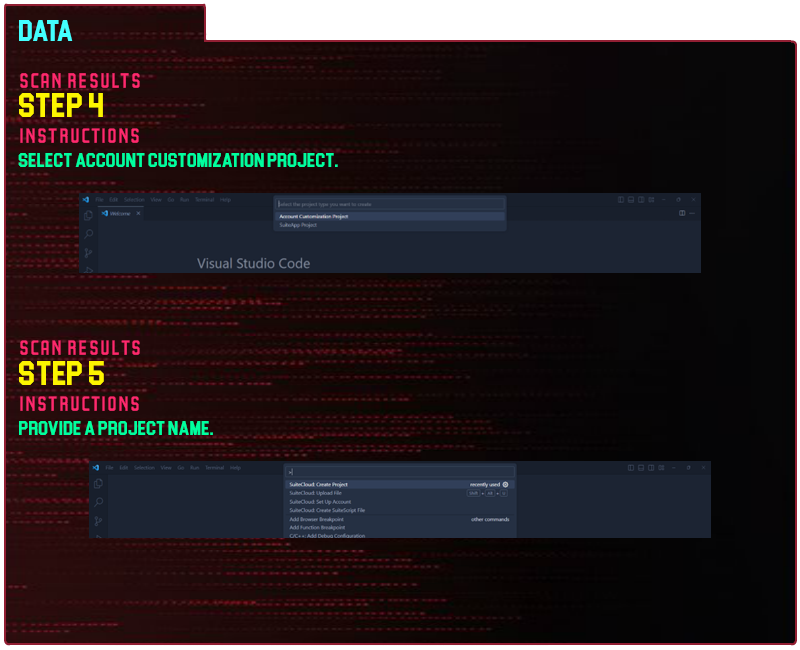
<style>
.page{position:relative;width:800px;height:650px}
.page>*{position:absolute;margin:0}
.t1{font:30px "Blockletter";color:#43ffff}
.t2{font:35px "Party-Lights-[WLM]-Flat";color:#ff296d}
.t3{font:35px "Blockletter";color:#fdf500}
.t4{font:20px "Blockletter";color:#00ff9f}
.t5{font:34.9px "Party-Lights-[WLM]-Flat";color:#ff296d}
.t6{font:34.9px "Blockletter";color:#fdf500}
.t7{font:19.9px "Blockletter";color:#00ff9f}
</style>
<div class="page">
<p class="t1" style="left:19px;top:20px;width:54px;height:21px">Data</p>
<p class="t2" style="left:20px;top:73px;width:120px;height:15px">Scan REsults</p>
<p class="t3" style="left:19px;top:93px;width:84px;height:24px">Step 4</p>
<p class="t2" style="left:20px;top:128px;width:119px;height:15px">instructions</p>
<p class="t4" style="left:18px;top:153px;width:320px;height:14px">Select ACcount customization project.</p>
<p class="t5" style="left:20px;top:340px;width:120px;height:15px">Scan REsults</p>
<p class="t6" style="left:19px;top:361px;width:85px;height:24px">Step 5</p>
<p class="t5" style="left:20px;top:396px;width:119px;height:15px">instructions</p>
<p class="t7" style="left:19px;top:421px;width:194px;height:14px">provide a project name.</p>
</div>
